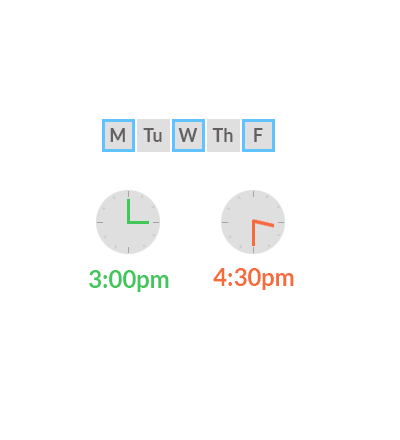
<style>
.page{position:relative;width:400px;height:440px;background:#ffffff}
.page>*{position:absolute;margin:0}
.t1{font:18.3px "Lato-Bold";color:#646060}
.t2{font:24px "Lato-Bold";color:#41c659}
.t3{font:24px "Lato-Bold";color:#f76a39}
</style>
<div class="page">
<p class="t1" style="left:110px;top:128px;width:15px;height:14px">M</p>
<p class="t1" style="left:143px;top:128px;width:19px;height:14px">Tu</p>
<p class="t1" style="left:178px;top:128px;width:20px;height:14px">W</p>
<p class="t1" style="left:212px;top:128px;width:21px;height:14px">Th</p>
<p class="t1" style="left:254px;top:128px;width:9px;height:14px">F</p>
<p class="t2" style="left:89px;top:270px;width:80px;height:22px">3:00pm</p>
<p class="t3" style="left:213px;top:268px;width:81px;height:22px">4:30pm</p>
</div>
